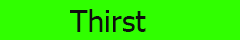
<style>
.page{position:relative;width:240px;height:40px;background:#30ff00}
.page>*{position:absolute;margin:0}
.t1{font:30px "Tahoma";color:#0f0e0e}
</style>
<div class="page">
<p class="t1" style="left:70px;top:9px;width:76px;height:23px">Thirst</p>
</div>
